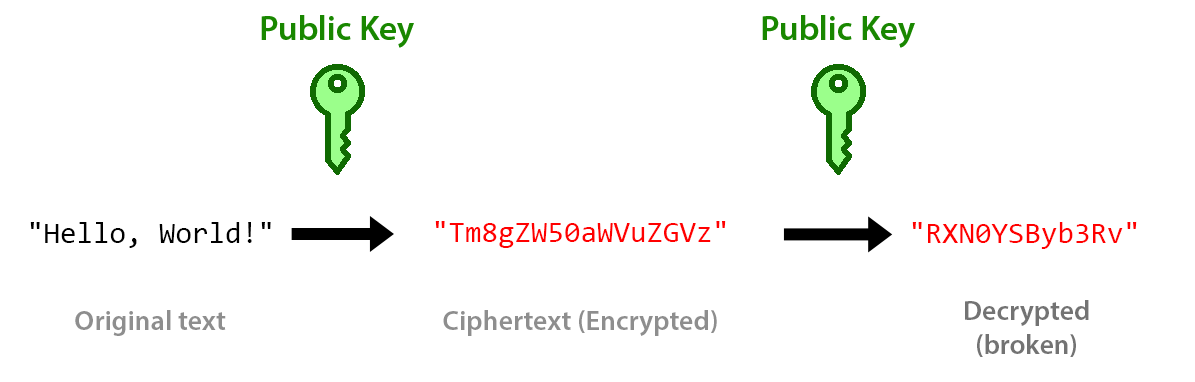
<style>
.page{position:relative;width:1195px;height:382px;background:#ffffff}
.page>*{position:absolute;margin:0}
.t1{font:30px "Consolas";color:#000000}
.t2{font:30px "Consolas";color:#ff0000}
.t3{font:28px "MyriadPro-Semibold";color:#737373}
.t4{font:28px "MyriadPro-Semibold";color:#8e8e8e}
</style>
<div class="page">
<p class="t1" style="left:30px;top:222px;width:241px;height:26px">"Hello, World!"</p>
<p class="t2" style="left:435px;top:221px;width:291px;height:27px">"Tm8gZW50aWVuZGVz"</p>
<p class="t2" style="left:912px;top:222px;width:225px;height:27px">"RXN0YSByb3Rv"</p>
<p class="t3" style="left:965px;top:300px;width:124px;height:57px;text-align:center">Decrypted<br>(broken)</p>
<p class="t4" style="left:75px;top:310px;width:151px;height:26px">Original text</p>
<p class="t4" style="left:443px;top:310px;width:274px;height:26px">Ciphertext (Encrypted)</p>
</div>
